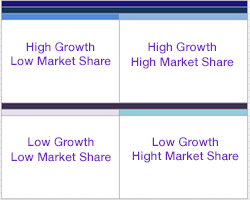
<style>
.page{position:relative;width:250px;height:200px;background:#ffffff}
.page>*{position:absolute;margin:0}
.t1{font:12px "HelveticaNeue-Medium";color:#7026c3}
</style>
<div class="page">
<p class="t1" style="left:11px;top:42px;width:100px;height:24px;text-align:center">High Growth<br>Low Market Share</p>
<p class="t1" style="left:131px;top:42px;width:103px;height:27px;text-align:center">High Growth<br>High Market Share</p>
<p class="t1" style="left:11px;top:137px;width:100px;height:25px;text-align:center">Low Growth<br>Low Market Share</p>
<p class="t1" style="left:132px;top:137px;width:107px;height:26px;text-align:center">Low Growth<br>Hight Market Share</p>
</div>
